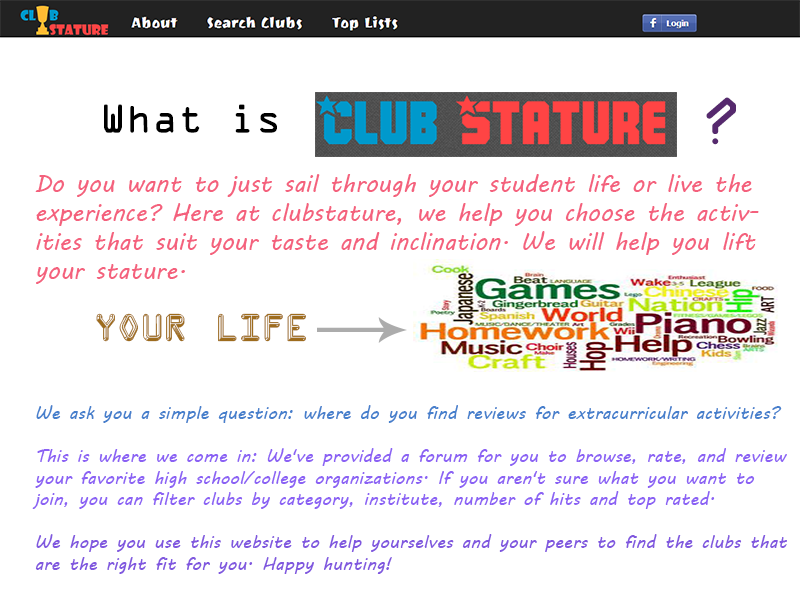
<style>
.page{position:relative;width:800px;height:600px;background:#ffffff}
.page>*{position:absolute;margin:0}
.t1{font:60px "OCRAStd";color:#56296e}
.t2{font:36px "OCRAStd";color:#000000}
.t3{font:24px "MVBoli";color:#f4617d}
.t4{font:30px "Kredit";color:#9e6c1d}
.t5{font:18px "MVBoli";color:#8b61f4}
.t6{font:18px "MVBoli";color:#467fcc}
.t7{font:18px "MVBoli";color:#8057df}
</style>
<div class="page">
<p class="t1" style="left:706px;top:97px;width:30px;height:48px">?</p>
<p class="t2" style="left:104px;top:104px;width:173px;height:29px">What is</p>
<p class="t3" style="left:35px;top:174px;width:724px;height:110px">Do you want to just sail through your student life or live the experience? Here at clubstature, we help you choose the activities that suit your taste and inclination. We will help you lift your stature.</p>
<p class="t4" style="left:96px;top:313px;width:210px;height:29px">Your life</p>
<p class="t5" style="left:32px;top:405px;width:755px;height:169px"><span class="t6">We ask you a simple question: where do you find reviews for extracurricular activities?<br><br></span>This is where we come in: We've provided a forum for you to browse, rate, and review your favorite high school/college organizations. If you aren't sure what you want to join, you can filter clubs by category, institute, number of hits and top rated.<br><br><span class="t7">We hope you use this website to help yourselves and your peers to find the clubs that are the right fit for you. Happy hunting!</span></p>
</div>
